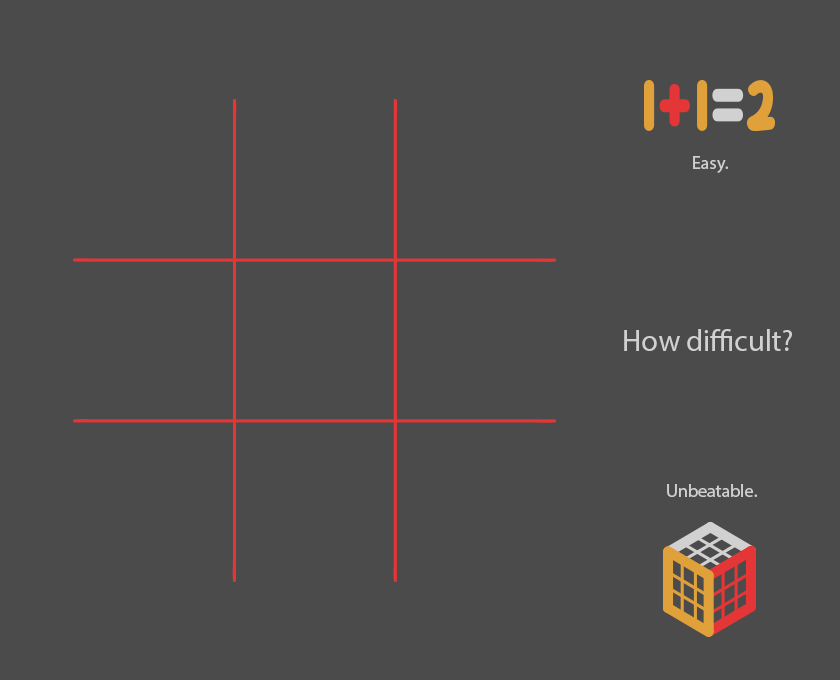
<style>
.page{position:relative;width:840px;height:680px;background:#4b4b4b}
.page>*{position:absolute;margin:0}
.t1{font:18px "MyriadPro-Regular";color:#d1d1d1}
.t2{font:30px "MyriadPro-Regular";color:#d1d1d1}
</style>
<div class="page">
<p class="t1" style="left:693px;top:156px;width:35px;height:17px">Easy.</p>
<p class="t2" style="left:624px;top:329px;width:168px;height:22px">How difficult?</p>
<p class="t1" style="left:667px;top:484px;width:90px;height:13px">Unbeatable.</p>
</div>
